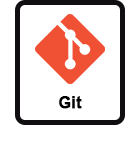
<style>
.page{position:relative;width:140px;height:160px;background:#ffffff}
.page>*{position:absolute;margin:0}
.t1{font:16px "Arial-BoldMT";color:#000000;font-weight:bold}
</style>
<div class="page">
<p class="t1" style="left:59px;top:96px;width:23px;height:13px">Git</p>
</div>
